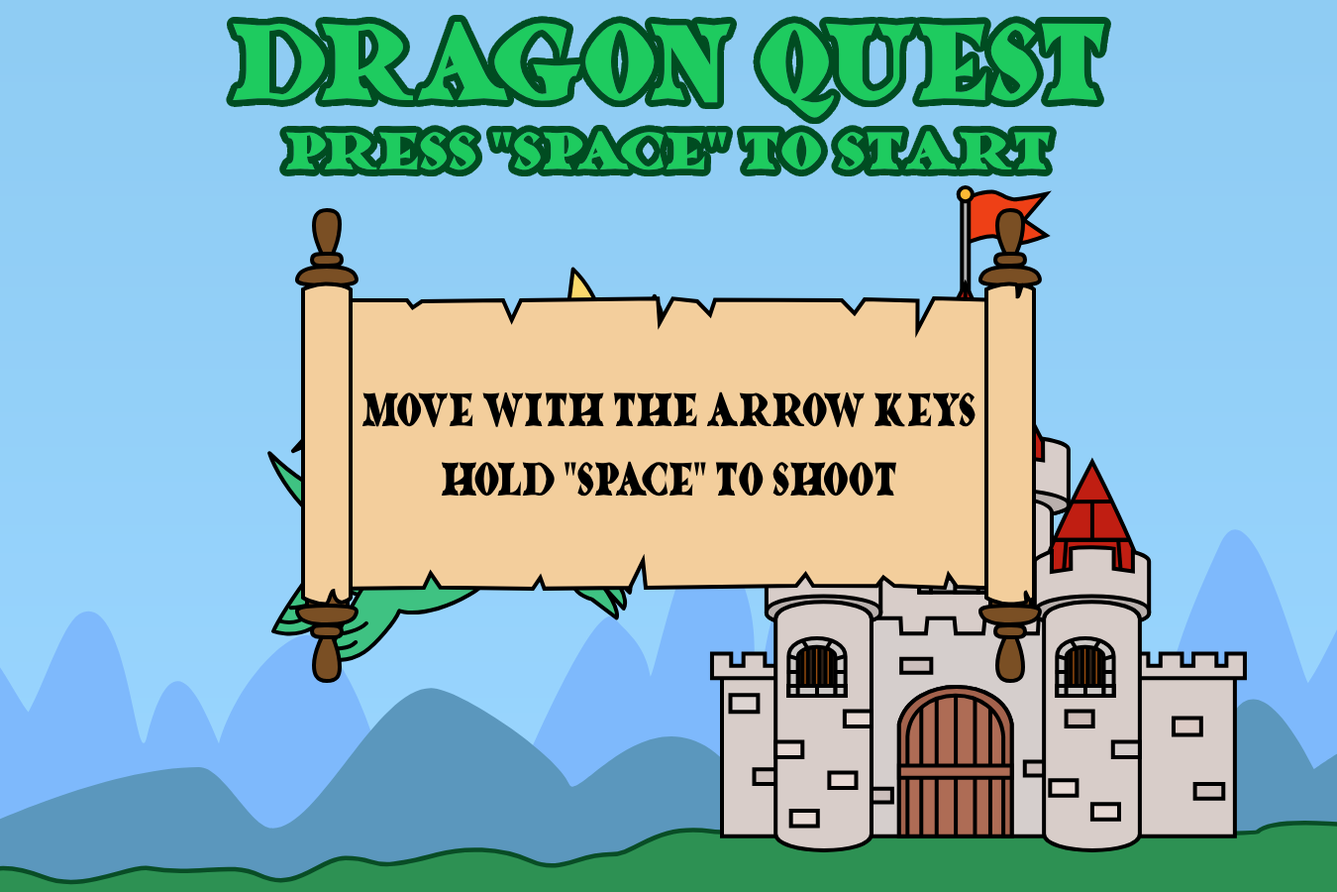
<style>
.page{position:relative;width:1337px;height:892px}
.page>*{position:absolute;margin:0}
.t1{font:118.7px "Dragonlands";color:#1ecb5f;scale:0.85 1}
.t2{font:57.7px "Dragonlands";color:#1ecb5f}
.t3{font:51.3px "Dragonlands";color:#000000;scale:0.68 1}
</style>
<div class="page">
<p class="t1" style="left:233px;top:22px;width:873px;height:96px">Dragon Quest</p>
<p class="t2" style="left:285px;top:131px;width:766px;height:39px">Press "SPACE" To Start</p>
<p class="t3" style="left:362px;top:391px;width:614px;height:36px">move with the arrow keys</p>
<p class="t3" style="left:442px;top:461px;width:455px;height:35px">hold "SPACE" to shoot</p>
</div>
